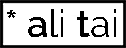
<style>
.page{position:relative;width:126px;height:48px;background:#ffffff}
.page>*{position:absolute;margin:0}
.t1{font:38px "Raleway-SemiBold";color:#000000}
.t2{font:38px "Raleway-Regular";color:#000000}
</style>
<div class="page">
<p class="t1" style="left:7px;top:9px;width:109px;height:28px">* a<span class="t2">li </span>t<span class="t2">ai</span></p>
</div>
